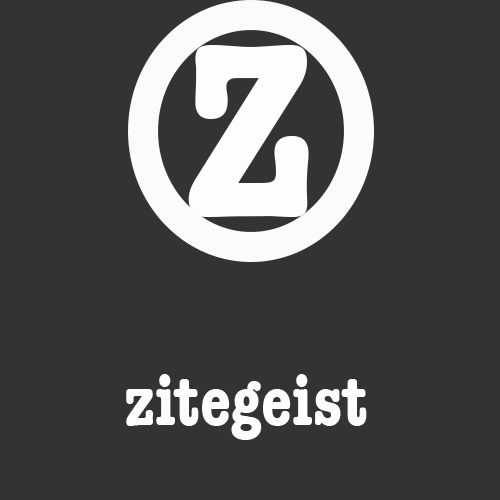
<style>
.page{position:relative;width:500px;height:500px;background:#333333}
.page>*{position:absolute;margin:0}
.t1{font:256.3px "AmericanTypewriter-CondensedBold";color:#fdfdfc}
.t2{font:72px "AmericanTypewriter-CondensedBold";color:#fdfdfc}
</style>
<div class="page">
<p class="t1" style="left:188px;top:45px;width:121px;height:172px">Z</p>
<p class="t2" style="left:126px;top:374px;width:241px;height:66px">zitegeist</p>
</div>
